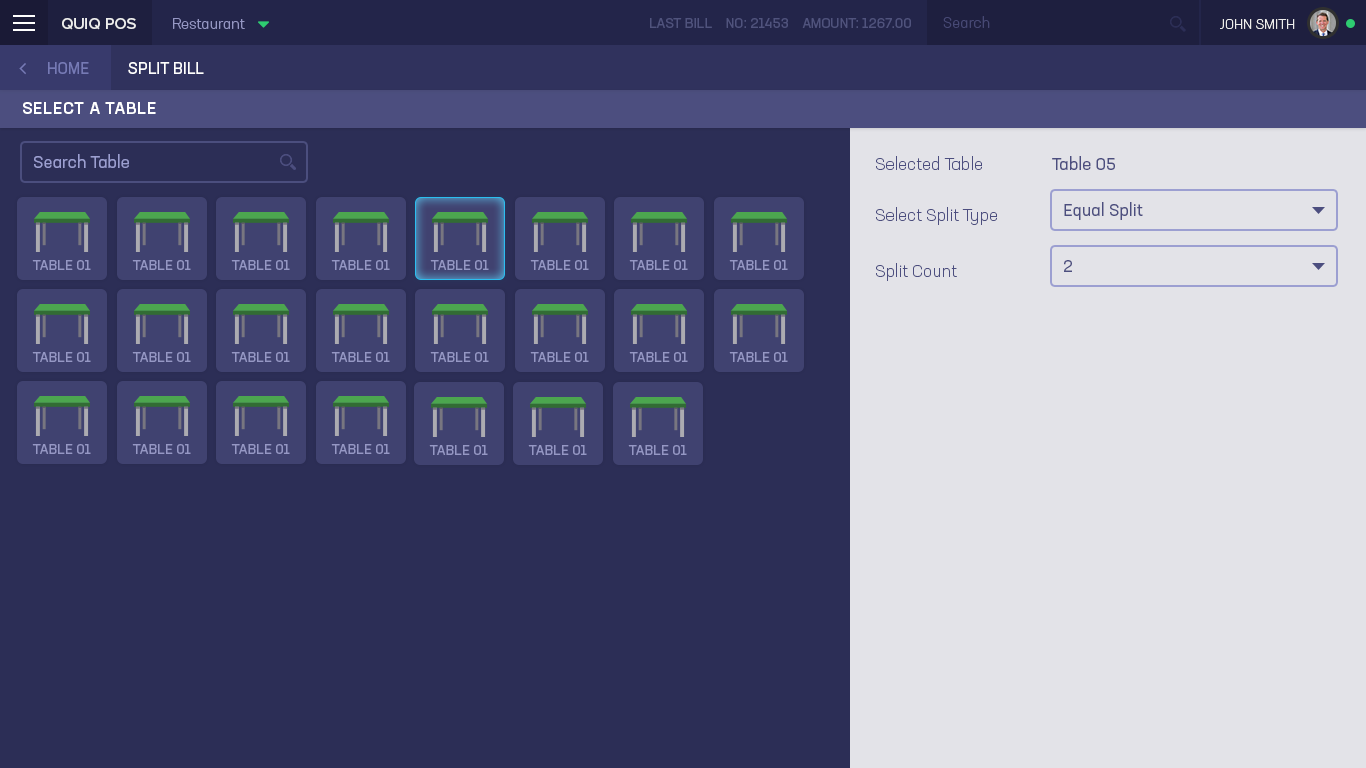
<style>
.page{position:relative;width:1366px;height:768px;background:#2c2e56}
.page>*{position:absolute;margin:0}
.t1{font:15px "NeusaNextStd-Light";color:#474975}
.t2{font:16px "ProximaNova-Medium";color:#ededed}
.t3{font:15px "NeusaNextStd-Light";color:#9597c4}
.t4{font:14px "NeusaNextStd-Regular";color:#50537d;text-transform:uppercase}
.t5{font:14px "NeusaNextStd-Light";color:#ededed;text-transform:uppercase}
.t6{font:16px "NeusaNextStd-Regular";color:#767ab5;text-transform:uppercase}
.t7{font:16px "NeusaNextStd-Regular";color:#ffffff;text-transform:uppercase}
.t8{font:17px "NeusaNextStd-Medium";letter-spacing:0.04em;color:#ffffff;text-transform:uppercase}
.t9{font:17px "NeusaNextStd-Regular";color:#9c9fd1}
.t10{font:17px "NeusaNextStd-Light";color:#4c4e7f}
.t11{font:17px "NeusaNextStd-Regular";color:#4c4e7f}
</style>
<div class="page">
<p class="t1" style="left:943px;top:16px;width:47px;height:12px">Search</p>
<p class="t2" style="left:62px;top:18px;width:74px;height:12px">QUIQ POS</p>
<p class="t3" style="left:173px;top:18px;width:72px;height:11px">Restaurant</p>
<p class="t4" style="left:650px;top:18px;width:261px;height:10px">Last Bill    NO: 21453    Amount: 1267.00</p>
<p class="t5" style="left:1220px;top:19px;width:75px;height:10px">John Smith</p>
<p class="t6" style="left:48px;top:62px;width:41px;height:12px">Home</p>
<p class="t7" style="left:128px;top:62px;width:76px;height:12px">Split Bill</p>
<p class="t8" style="left:23px;top:102px;width:133px;height:12px">Select A Table</p>
<p class="t9" style="left:34px;top:154px;width:95px;height:14px">Search Table</p>
<p class="t10" style="left:876px;top:156px;width:106px;height:14px">Selected Table</p>
<p class="t11" style="left:1052px;top:156px;width:63px;height:14px">Table 05</p>
<p class="t10" style="left:876px;top:207px;width:121px;height:18px">Select Split Type</p>
<p class="t11" style="left:1064px;top:202px;width:79px;height:18px">Equal Split</p>
<p class="t10" style="left:876px;top:263px;width:81px;height:18px">Split Count</p>
<p class="t11" style="left:1064px;top:260px;width:8px;height:12px">2</p>
</div>
